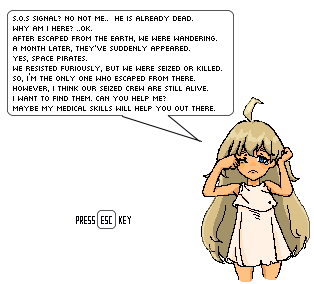
<style>
.page{position:relative;width:314px;height:284px;background:#ffffff}
.page>*{position:absolute;margin:0}
.t1{font:10px/10px "MunroSmall";color:#000000}
</style>
<div class="page">
<p class="t1" style="left:13px;top:16px;width:209px;height:95px">S.o.S signal? No not me..  He is already dead.<br>Why am i here? ..ok.<br>After escaped from the earth, we were wandering.<br>A month later, They've suddenly appeared.<br>Yes, space pirates.<br>we resisted furiously, but we were seized or killed.<br>so, i’m the only one who escaped from there.<br>however, i think our seized crew are still alive.<br>i want to find them. can you help me?<br>maybe my medical skills will help you out there.</p>
</div>
